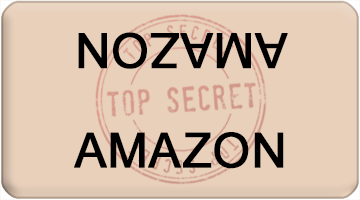
<style>
.page{position:relative;width:360px;height:200px;background:#e8d0bb}
.page>*{position:absolute;margin:0}
.t1{font:48px "ArialMT";color:#000000;font-weight:bold}
</style>
<div class="page">
<p class="t1" style="left:78px;top:32px;width:210px;height:37px;rotate:180deg">AMAZON</p>
<p class="t1" style="left:74px;top:132px;width:210px;height:37px">AMAZON</p>
</div>
